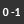
<style>
.page{position:relative;width:24px;height:24px;background:#333333}
.page>*{position:absolute;margin:0}
.t1{font:10px "Lato-Bold";color:#ffffff}
</style>
<div class="page">
<p class="t1" style="left:2px;top:8px;width:18px;height:8px">0 -1</p>
</div>
